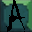
<style>
.page{position:relative;width:32px;height:32px}
.page>*{position:absolute;margin:0}
.t1{font:41.7px "Chiller-Regular";color:#000000}
</style>
<div class="page">
<p class="t1" style="left:6px;top:0px;width:19px;height:32px">A</p>
</div>
